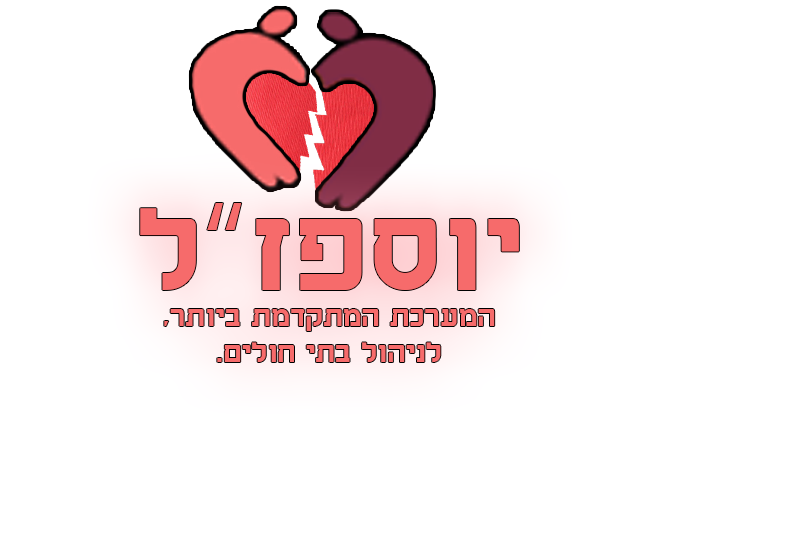
<style>
.page{position:relative;width:800px;height:534px;background:#ffffff}
.page>*{position:absolute;margin:0}
.t1{font:30px "GuttmanAharoni-Bold";color:#f66b6b}
.t2{font:123.1px "GuttmanAharoni-Bold";color:#f66b6b}
.t3{font:123.1px "SegoeUIEmoji";color:#f66b6b}
</style>
<div class="page">
<p class="t1" style="left:140px;top:203px;width:379px;height:159px;text-align:center"><span class="t2">יוספז</span><span class="t3">”</span><span class="t2">ל<br></span>המערכת המתקדמת ביותר,<br>לניהול בתי חולים.</p>
</div>
